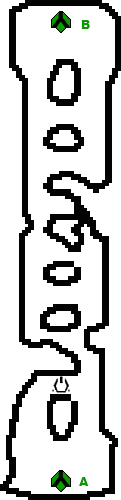
<style>
.page{position:relative;width:121px;height:500px;background:#ffffff}
.page>*{position:absolute;margin:0}
.t1{font:12px "Arial-Black";color:#0c9801}
</style>
<div class="page">
<p class="t1" style="left:81px;top:20px;width:9px;height:9px">B</p>
<p class="t1" style="left:79px;top:477px;width:10px;height:9px">A</p>
</div>
